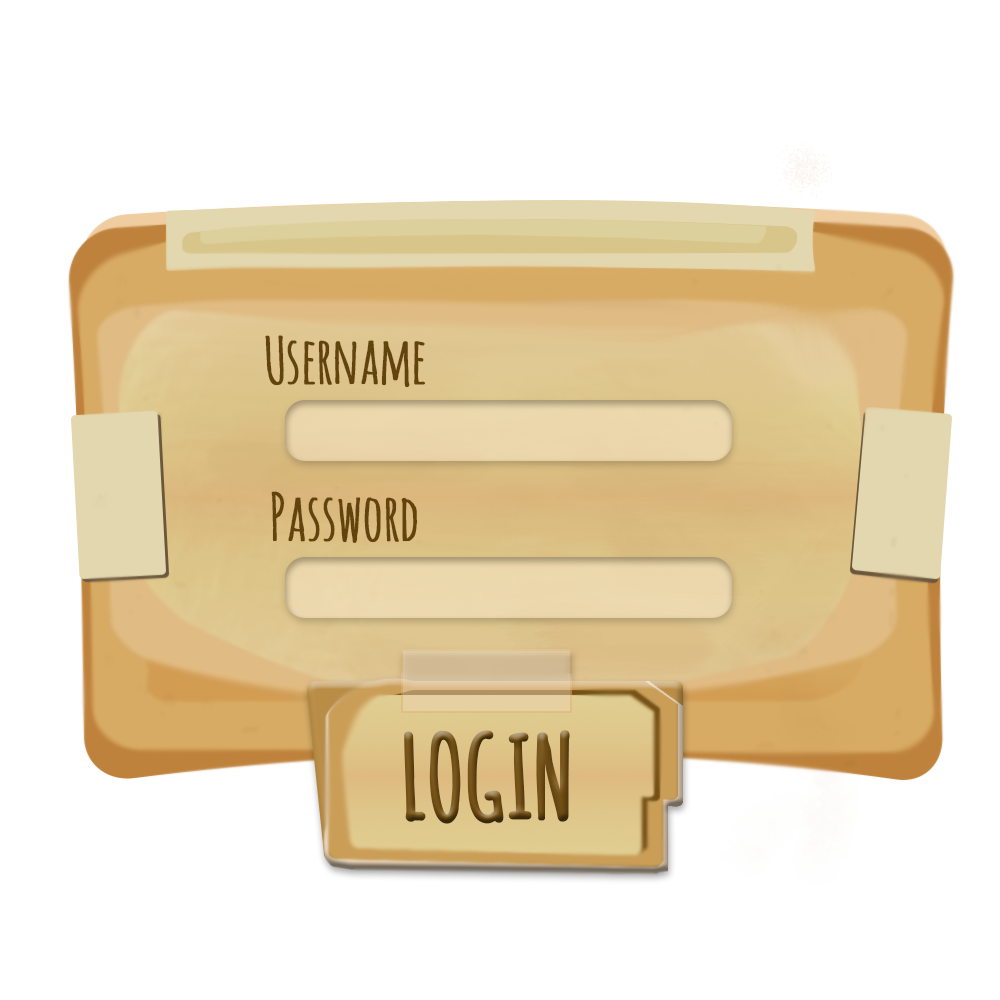
<style>
.page{position:relative;width:1000px;height:1000px;background:#ffffff}
.page>*{position:absolute;margin:0}
.t1{font:63.2px "AmaticSC-Regular";letter-spacing:-0.02em;color:#63430c;font-weight:bold;scale:0.97 1}
.t2{font:112.3px "AmaticSC-Bold";letter-spacing:-0.02em;color:#735015;font-weight:bold;scale:0.97 1}
</style>
<div class="page">
<p class="t1" style="left:265px;top:335px;width:160px;height:53px">Username</p>
<p class="t1" style="left:271px;top:491px;width:147px;height:52px">Password</p>
<p class="t2" style="left:404px;top:730px;width:166px;height:94px">LOGIN</p>
</div>
